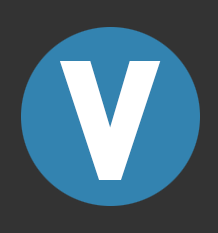
<style>
.page{position:relative;width:218px;height:233px;background:#333333}
.page>*{position:absolute;margin:0}
.t1{font:166.7px "DIN-Black";color:#ffffff}
</style>
<div class="page">
<p class="t1" style="left:60px;top:61px;width:101px;height:119px">V</p>
</div>
